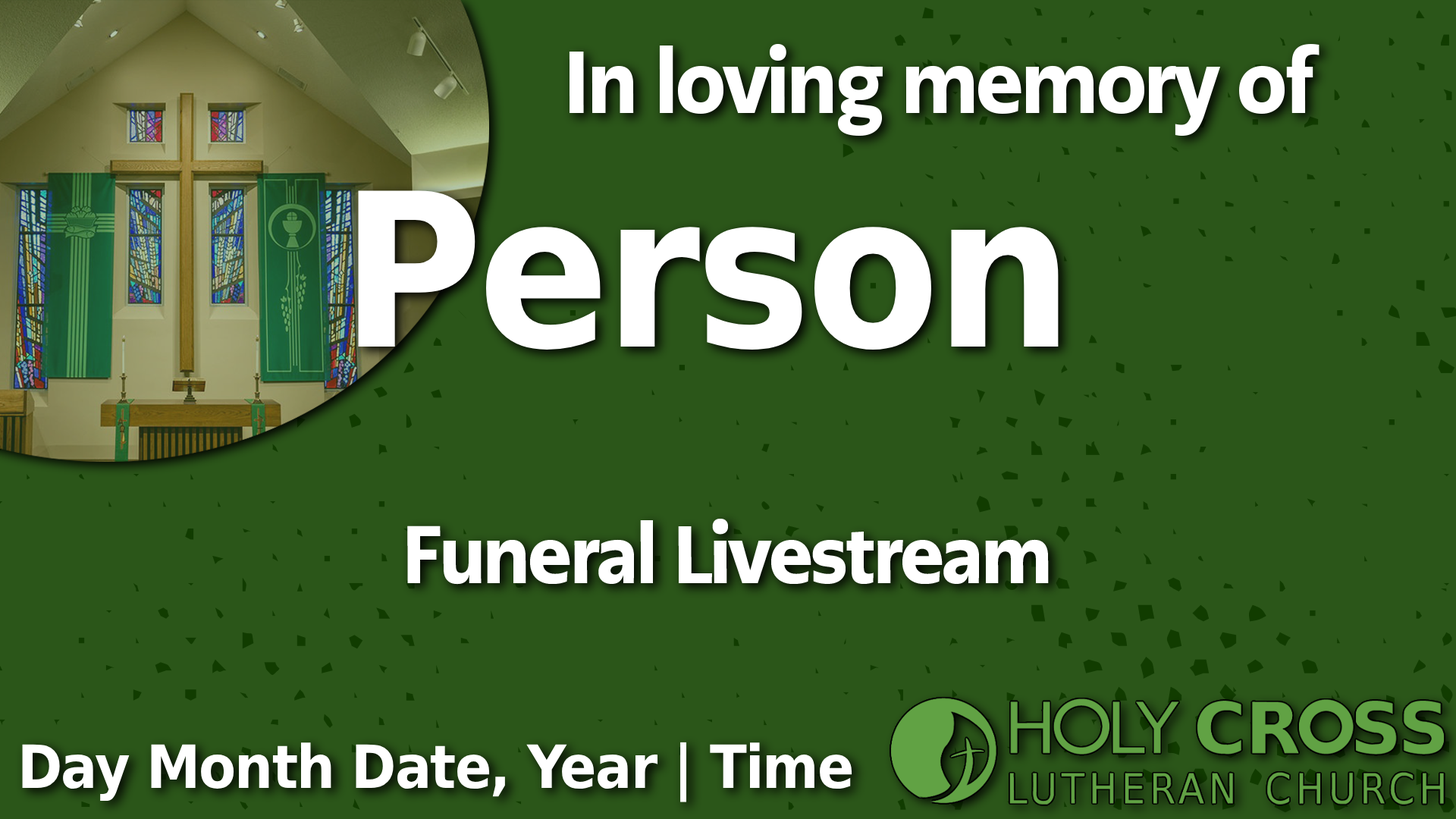
<style>
.page{position:relative;width:1456px;height:819px;background:#2b5619}
.page>*{position:absolute;margin:0}
.t1{font:88.1px "PMNCaeciliaSansText-Blk";letter-spacing:-0.025em;color:#ffffff;scale:0.91 1}
.t2{font:213.7px "DejaVuSans-Bold";letter-spacing:-0.025em;color:#ffffff;scale:0.91 1}
.t3{font:81.5px "PMNCaeciliaSansText-Blk";letter-spacing:-0.025em;color:#ffffff;scale:0.91 1}
.t4{font:59.7px "DejaVuSans-Bold";letter-spacing:-0.025em;color:#ffffff;scale:0.91 1}
</style>
<div class="page">
<p class="t1" style="left:569px;top:43px;width:750px;height:93px">In loving memory of</p>
<p class="t2" style="left:358px;top:190px;width:701px;height:160px">Person</p>
<p class="t3" style="left:407px;top:519px;width:642px;height:66px">Funeral Livestream</p>
<p class="t4" style="left:22px;top:742px;width:830px;height:60px">Day Month Date, Year | Time</p>
</div>
